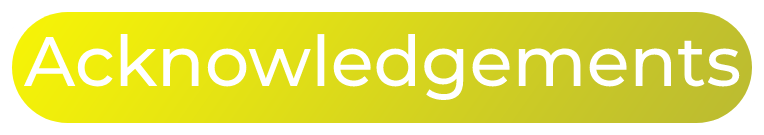
<style>
.page{position:relative;width:764px;height:135px;background:#ffffff}
.page>*{position:absolute;margin:0}
.t1{font:70px "Montserrat-Medium";color:#ffffff}
</style>
<div class="page">
<p class="t1" style="left:23px;top:34px;width:717px;height:66px">Acknowledgements</p>
</div>
